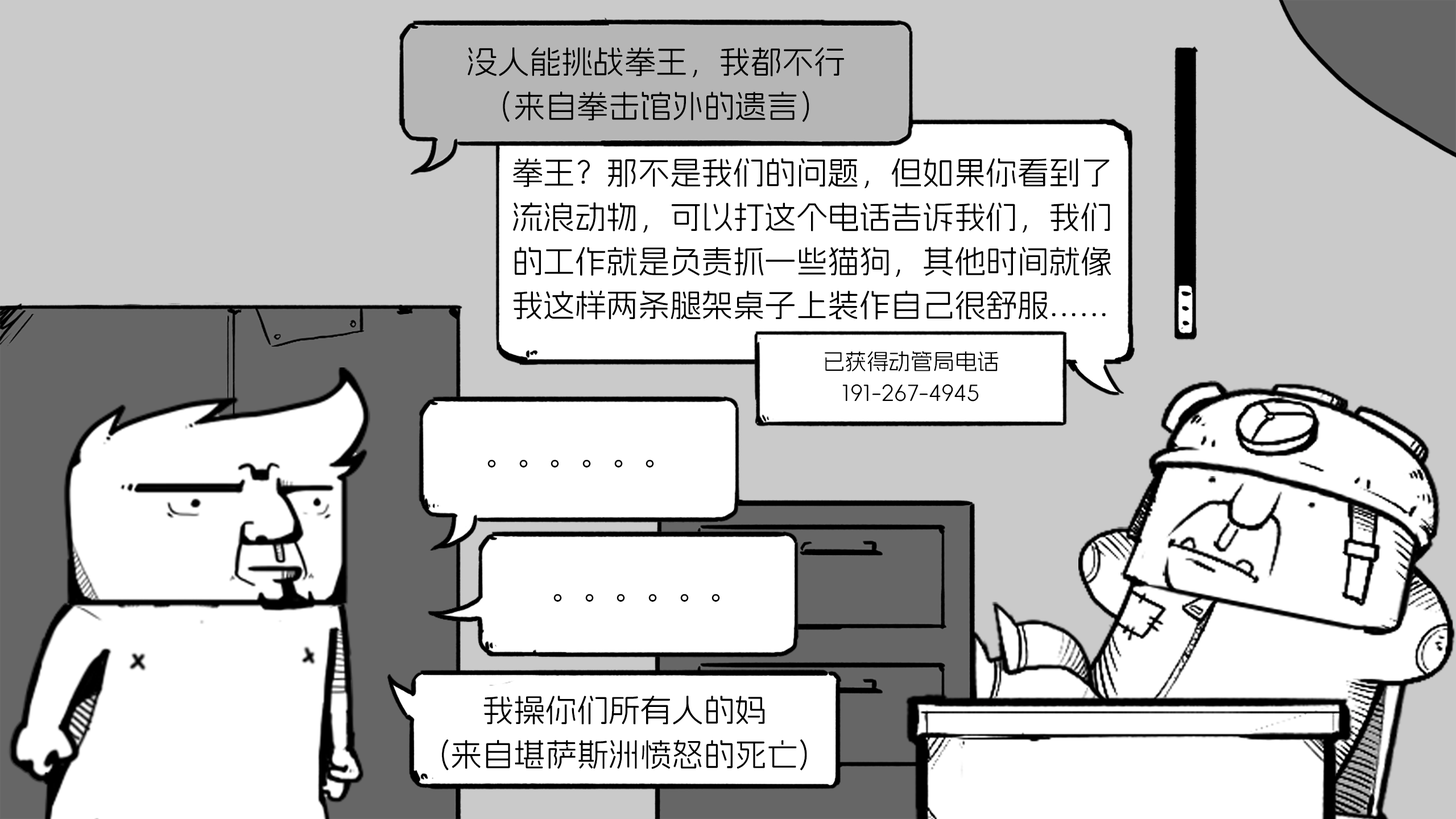
<style>
.page{position:relative;width:1456px;height:819px;background:#ffffff}
.page>*{position:absolute;margin:0}
.t1{font:31.6px/44.2px "AlimamaFangYuanTiVF-Regular";color:#000000}
.t2{font:22.1px/31.6px "AlimamaFangYuanTiVF-Regular";color:#000000}
.t3{font:31.6px "AlimamaFangYuanTiVF-Regular";color:#000000}
</style>
<div class="page">
<p class="t1" style="left:468px;top:47px;width:376px;height:75px;text-align:center">没人能挑战拳王，我都不行<br>（来自拳击馆外的遗言）</p>
<p class="t1" style="left:513px;top:158px;width:598px;height:162px">拳王？那不是我们的问题，但如果你看到了流浪动物，可以打这个电话告诉我们，我们的工作就是负责抓一些猫狗，其他时间就像我这样两条腿架桌子上装作自己很舒服......</p>
<p class="t2" style="left:825px;top:351px;width:174px;height:51px;text-align:center">已获得动管局电话<br>191-267-4945</p>
<p class="t3" style="left:487px;top:460px;width:167px;height:8px">。。。。。。</p>
<p class="t3" style="left:553px;top:594px;width:167px;height:8px">。。。。。。</p>
<p class="t1" style="left:442px;top:696px;width:365px;height:75px;text-align:center">我操你们所有人的妈<br>(来自堪萨斯洲愤怒的死亡)</p>
</div>
